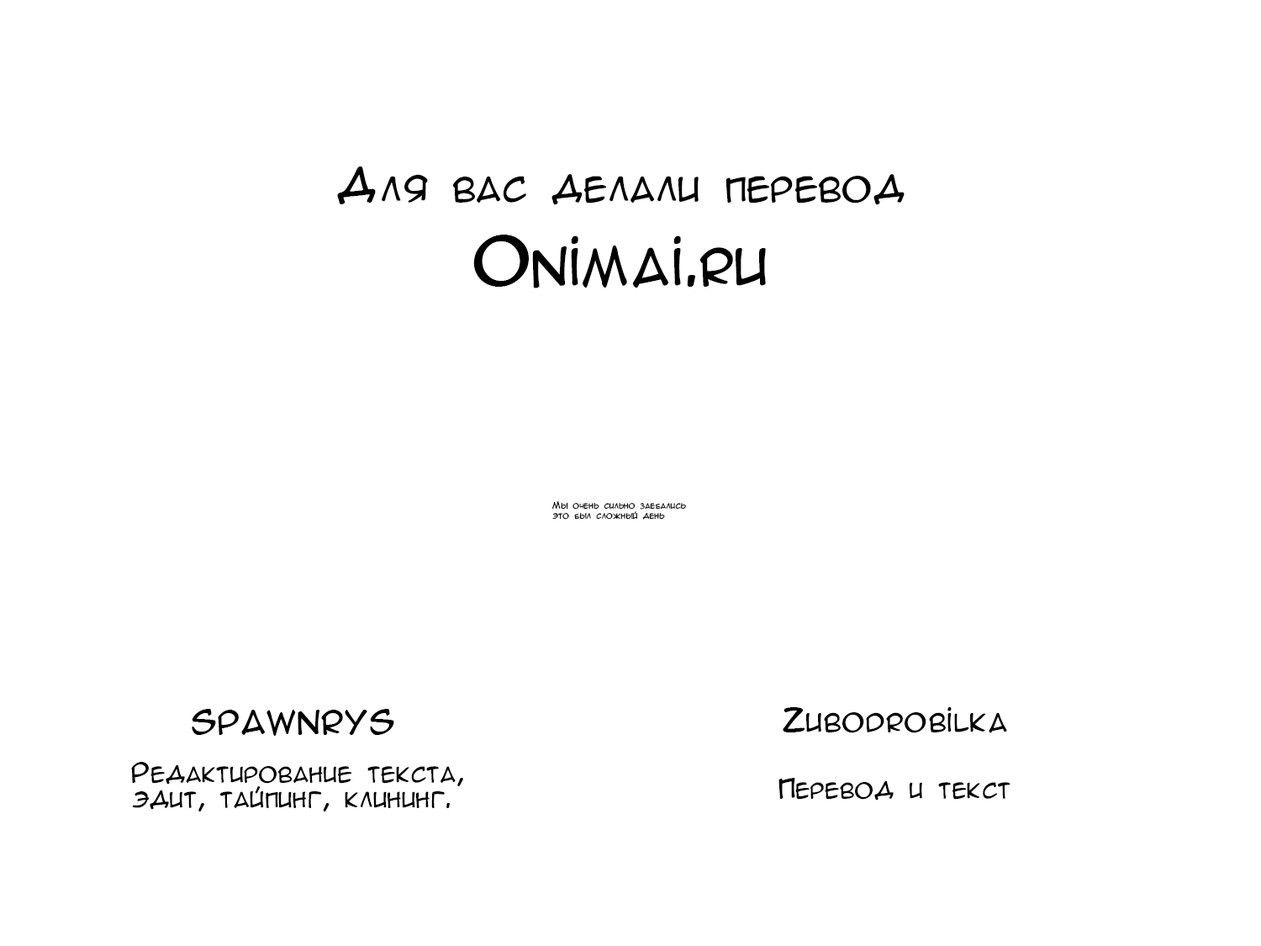
<style>
.page{position:relative;width:1261px;height:946px;background:#ffffff}
.page>*{position:absolute;margin:0}
.t1{font:40.3px "AnimeAcev3";color:#000000}
.t2{font:60.5px "AnimeAcev3";color:#000000}
.t3{font:8.4px/25.2px "AnimeAcev3";color:#000000}
.t4{font:8.4px/10.1px "AnimeAcev3";color:#000000}
.t5{font:30.3px "AnimeAcev3";color:#000000}
.t6{font:25.2px/25.2px "AnimeAcev3";color:#000000}
.t7{font:25.2px "AnimeAcev3";color:#000000}
</style>
<div class="page">
<p class="t1" style="left:337px;top:166px;width:567px;height:39px">Для вас делали перевод</p>
<p class="t2" style="left:473px;top:235px;width:293px;height:53px">Onimai.ru</p>
<p class="t3" style="left:552px;top:501px;width:134px;height:18px">Мы очень сильно заебались<br><span class="t4">это был сложный день</span></p>
<p class="t5" style="left:192px;top:709px;width:202px;height:27px">SPAWNRYS</p>
<p class="t5" style="left:783px;top:706px;width:224px;height:27px">Zubodrobilka</p>
<p class="t6" style="left:131px;top:762px;width:332px;height:49px">Редактирование текста,<br>эдит, тайпинг, клининг.</p>
<p class="t7" style="left:778px;top:778px;width:232px;height:22px">Перевод и текст</p>
</div>
